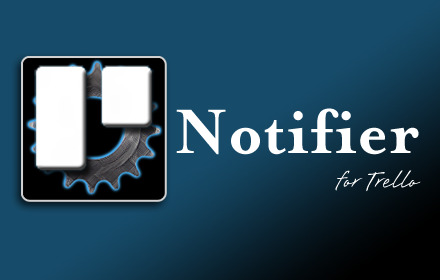
<style>
.page{position:relative;width:440px;height:280px;background:#164b69}
.page>*{position:absolute;margin:0}
.t1{font:72px "MrsEavesSmartLigBold";color:#ffffff}
.t2{font:30px "Brisa";color:#ffffff}
</style>
<div class="page">
<p class="t1" style="left:176px;top:108px;width:243px;height:47px">Notifier</p>
<p class="t2" style="left:335px;top:170px;width:86px;height:22px">for Trello</p>
</div>
